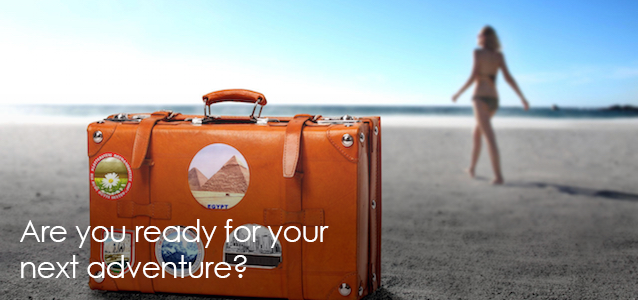
<style>
.page{position:relative;width:638px;height:300px}
.page>*{position:absolute;margin:0}
.t1{font:30px "CenturyGothic";letter-spacing:-0.025em;color:#ffffff}
</style>
<div class="page">
<p class="t1" style="left:20px;top:219px;width:309px;height:59px">Are you ready for your <br>next adventure?</p>
</div>
